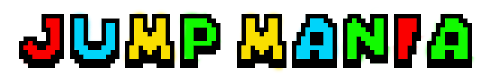
<style>
.page{position:relative;width:500px;height:80px;background:#ffffff}
.page>*{position:absolute;margin:0}
.t1{font:72px "Mario-Kart-DS";color:#000000}
</style>
<div class="page">
<p class="t1" style="left:19px;top:14px;width:453px;height:54px">JUMP MANIA</p>
</div>
